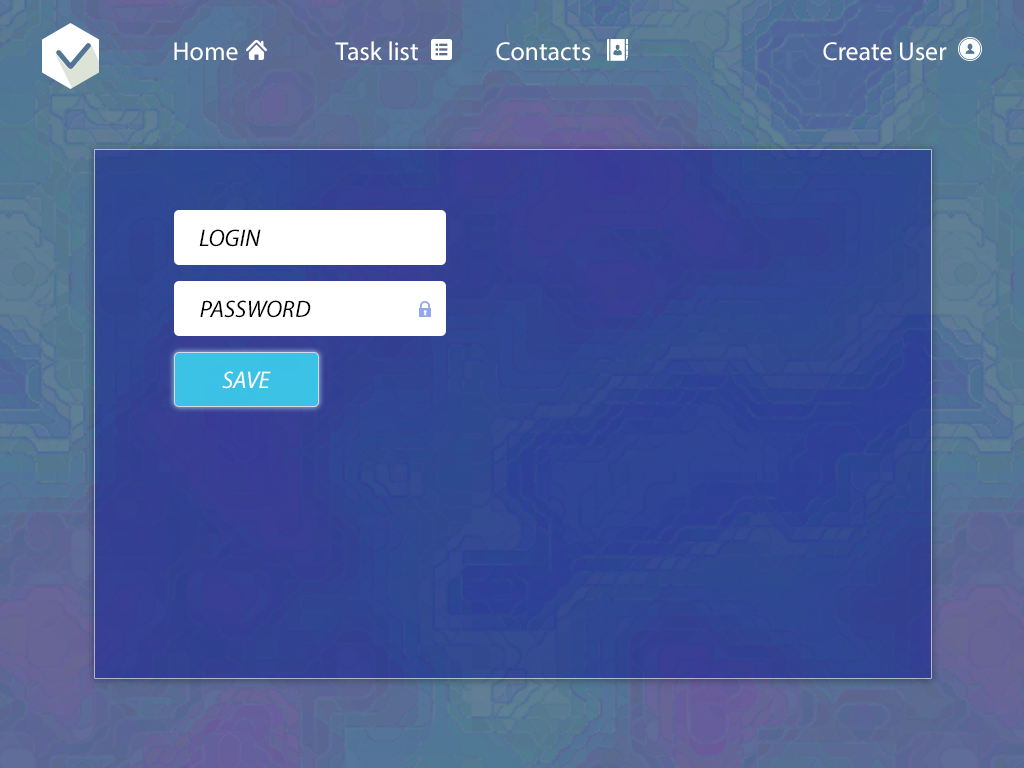
<style>
.page{position:relative;width:1024px;height:768px}
.page>*{position:absolute;margin:0}
.t1{font:26px "MyriadPro-Regular";color:#ffffff}
.t2{font:24px "MyriadPro-It";color:#000000}
.t3{font:24px "MyriadPro-It";color:#ffffff}
</style>
<div class="page">
<p class="t1" style="left:335px;top:41px;width:83px;height:20px">Task list</p>
<p class="t1" style="left:174px;top:42px;width:64px;height:19px">Home</p>
<p class="t1" style="left:496px;top:42px;width:95px;height:19px">Contacts</p>
<p class="t1" style="left:823px;top:42px;width:124px;height:19px">Create User</p>
<p class="t2" style="left:199px;top:229px;width:62px;height:18px">LOGIN</p>
<p class="t2" style="left:200px;top:300px;width:111px;height:18px">PASSWORD</p>
<p class="t3" style="left:222px;top:371px;width:49px;height:18px">SAVE</p>
</div>
